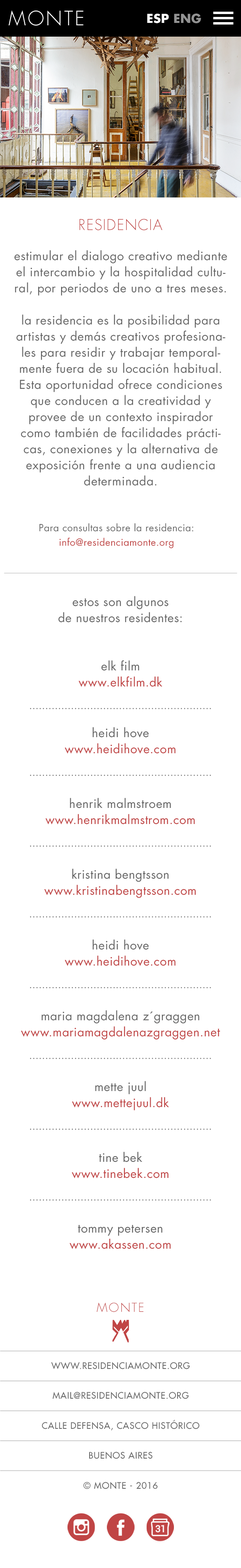
<style>
.page{position:relative;width:241px;height:1568px;background:#ffffff}
.page>*{position:absolute;margin:0}
.t1{font:19.3px "Futura-Light";letter-spacing:0.1em;color:#ffffff;text-transform:uppercase}
.t2{font:12.1px "Futura-Bold";letter-spacing:0.015em;color:#ffffff;text-transform:uppercase}
.t3{font:12.1px "Futura-Bold";letter-spacing:0.015em;color:#929292;text-transform:uppercase}
.t4{font:14.5px "Futura-Light";letter-spacing:0.05em;color:#c04645;text-transform:uppercase}
.t5{font:12.1px/16.1px "Futura-Book";letter-spacing:0.03em;color:#666666}
.t6{font:9.7px/14.5px "Futura-Book";letter-spacing:0.03em;color:#666666}
.t7{font:9.7px/14.5px "Futura-Book";letter-spacing:0.03em;color:#c04645}
.t8{font:9.7px/22.5px "Futura-Book";letter-spacing:0.025em;color:#666666}
.t9{font:12.1px/16.1px "Futura-Book";letter-spacing:0.025em;color:#666666}
.t10{font:12.1px/16.1px "Futura-Book";letter-spacing:0.025em;color:#c04545}
.t11{font:12.1px "Futura-Light";letter-spacing:0.1em;color:#c04545}
.t12{font:8.8px/29.9px "Futura";letter-spacing:0.05em;color:#666666;text-transform:uppercase}
</style>
<div class="page">
<p class="t1" style="left:8px;top:10px;width:76px;height:16px">monte</p>
<p class="t2" style="left:147px;top:13px;width:54px;height:10px">esp <span class="t3">eng</span></p>
<p class="t4" style="left:80px;top:219px;width:82px;height:11px">residencia</p>
<p class="t5" style="left:14px;top:250px;width:213px;height:236px;text-align:center">estimular el dialogo creativo mediante el intercambio y la hospitalidad cultural, por periodos de uno a tres meses. <br><br>la residencia es la posibilidad para artistas y demás creativos profesionales para residir y trabajar temporalmente fuera de su locación habitual. Esta oportunidad ofrece condiciones que conducen a la creatividad y provee de un contexto inspirador como también de facilidades prácticas, conexiones y la alternativa de <br>exposición frente a una audiencia <br>determinada.</p>
<p class="t6" style="left:39px;top:523px;width:154px;height:26px;text-align:center">Para consultas sobre la residencia:<br><span class="t7">info@residenciamonte.org</span></p>
<p class="t8" style="left:21px;top:596px;width:199px;height:653px;text-align:center"><span class="t9">estos son algunos<br>de nuestros residentes:<br><br><br>elk film<br></span><span class="t10">www.elkfilm.dk<br></span>.........................................................<br><br><span class="t9">heidi hove<br></span><span class="t10">www.heidihove.com<br></span>.........................................................<br><br><span class="t9">henrik malmstroem<br></span><span class="t10">www.henrikmalmstrom.com<br></span>.........................................................<br><br><span class="t9">kristina bengtsson<br></span><span class="t10">www.kristinabengtsson.com<br></span>.........................................................<br><br><span class="t9">heidi hove<br></span><span class="t10">www.heidihove.com<br></span>.........................................................<br><br><span class="t9">maria magdalena z´graggen<br></span><span class="t10">www.mariamagdalenazgraggen.net<br></span>.........................................................<br><br><span class="t9">mette juul<br></span><span class="t10">www.mettejuul.dk<br></span>.........................................................<br><br><span class="t9">tine bek<br></span><span class="t10">www.tinebek.com<br></span>.........................................................<br><br><span class="t9">tommy petersen<br></span><span class="t10">www.akassen.com</span></p>
<p class="t11" style="left:97px;top:1302px;width:47px;height:10px">MONTE</p>
<p class="t12" style="left:42px;top:1362px;width:158px;height:127px;text-align:center">WWW.residenciamonte.org<br>mail@residenciamonte.org<br>calle defensa, casco histórico<br>Buenos Aires<br>© Monte - 2016</p>
</div>
